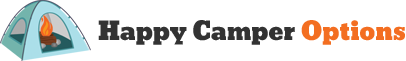
<style>
.page{position:relative;width:406px;height:61px;background:#ffffff}
.page>*{position:absolute;margin:0}
.t1{font:24.8px "Bevan";color:#333333}
.t2{font:24.8px "Bevan";color:#f36e21}
</style>
<div class="page">
<p class="t1" style="left:98px;top:20px;width:307px;height:25px">Happy Camper <span class="t2">Options</span></p>
</div>
